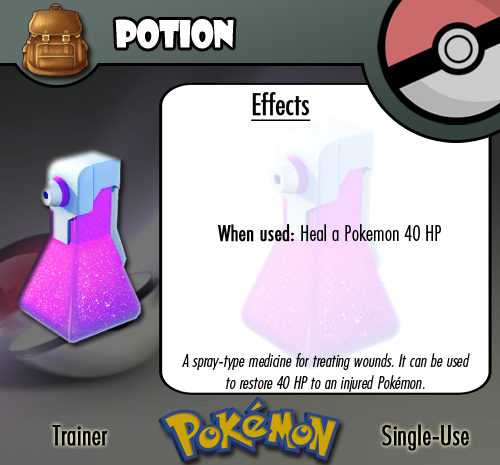
<style>
.page{position:relative;width:500px;height:465px;background:#ffffff}
.page>*{position:absolute;margin:0}
.t1{font:36.7px "ShowcardGothic-Reg";letter-spacing:-0.025em;color:#ffffff;scale:0.91 1}
.t2{font:22.2px "FuturaCondensedBQ-Light";color:#010101}
.t3{font:27.8px "FuturaCondensedBQ-Light";color:#010101;font-weight:bold}
.t4{font:30.6px "FuturaCondensedBQ-Light";color:#010101;font-weight:bold;text-decoration:underline}
.t5{font:22.2px "FuturaCondensedBQ-Light";color:#010101;font-weight:bold}
.t6{font:18.1px "FuturaCondensedBQ-Light";color:#010101;font-style:italic}
</style>
<div class="page">
<p class="t1" style="left:115px;top:19px;width:119px;height:30px">Potion</p>
<p class="t2" style="left:218px;top:92px;width:223px;height:150px"><span class="t3">  </span><span class="t4">Effects<br><br><br><br></span><span class="t5">When used: </span>Heal a Pokemon 40 HP</p>
<p class="t6" style="left:182px;top:353px;width:288px;height:39px;text-align:center">A spray-type medicine for treating wounds. It can be used to restore 40 HP to an injured Pokémon.</p>
<p class="t3" style="left:52px;top:425px;width:55px;height:21px">Trainer</p>
<p class="t3" style="left:382px;top:424px;width:87px;height:27px">Single-Use</p>
</div>
